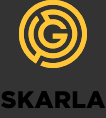
<style>
.page{position:relative;width:106px;height:118px;background:#333333}
.page>*{position:absolute;margin:0}
.t1{font:24px "GothamBlack";letter-spacing:0.01em;color:#000000;text-transform:uppercase}
</style>
<div class="page">
<p class="t1" style="left:1px;top:91px;width:105px;height:18px">skarla</p>
</div>
